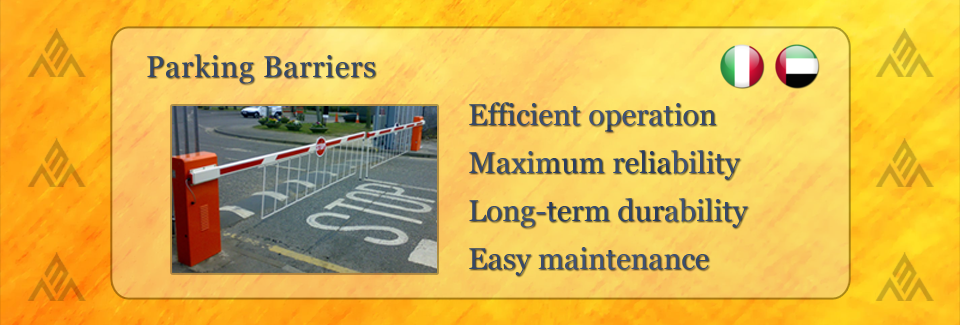
<style>
.page{position:relative;width:960px;height:325px}
.page>*{position:absolute;margin:0}
.t1{font:30px "Georgia";letter-spacing:0.025em;color:#364866}
.t2{font:30px/48px "Georgia";color:#394b6c}
</style>
<div class="page">
<p class="t1" style="left:147px;top:54px;width:228px;height:30px">Parking Barriers</p>
<p class="t2" style="left:469px;top:102px;width:279px;height:174px">Efficient operation<br>Maximum reliability<br>Long-term durability<br>Easy maintenance</p>
</div>
